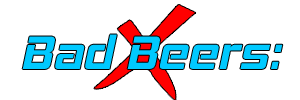
<style>
.page{position:relative;width:300px;height:100px;background:#ffffff}
.page>*{position:absolute;margin:0}
.t1{font:48px "HemiHeadRg-BoldItalic";color:#00c9ff}
</style>
<div class="page">
<p class="t1" style="left:22px;top:34px;width:261px;height:35px">Bad Beers:</p>
</div>
